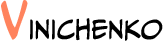
<style>
.page{position:relative;width:164px;height:42px;background:#ffffff}
.page>*{position:absolute;margin:0}
.t1{font:24px "v_CCMeanwhile-Regular";color:#000000}
.t2{font:48px "v_CCMeanwhile-Regular";color:#ff835d}
</style>
<div class="page">
<p class="t1" style="left:1px;top:0px;width:162px;height:41px"><span class="t2">V</span>inichenko</p>
</div>
